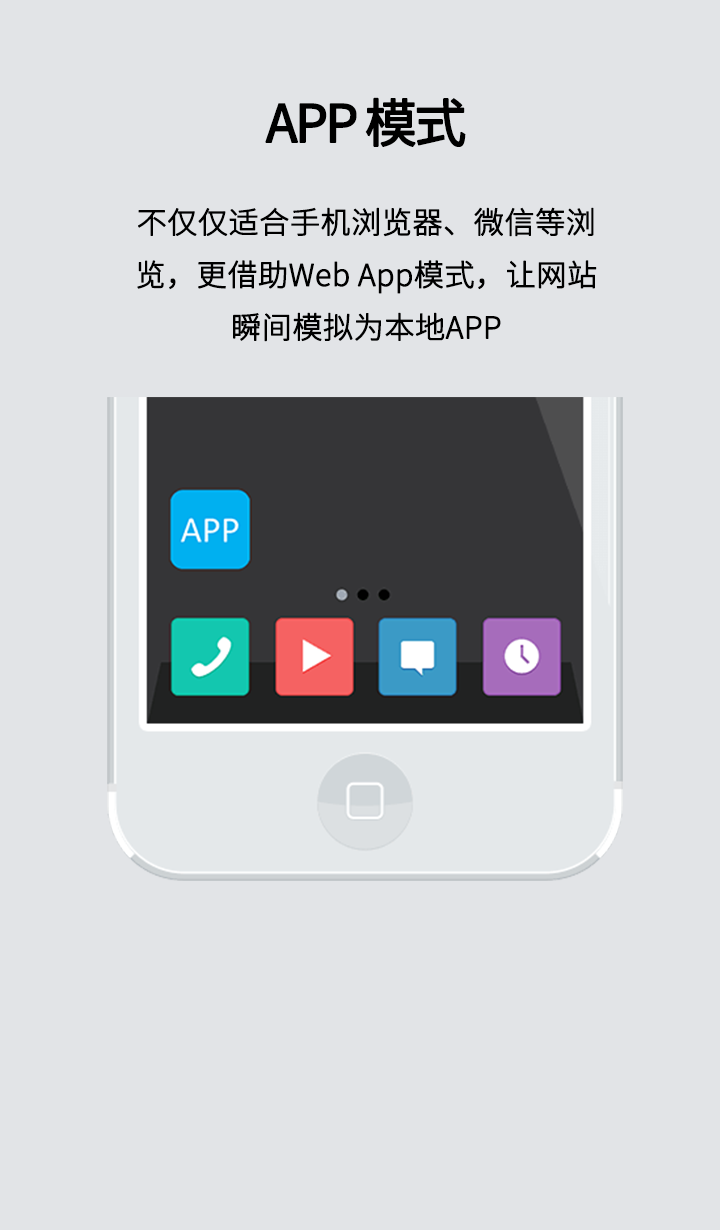
<style>
.page{position:relative;width:720px;height:1230px;background:#e2e4e7}
.page>*{position:absolute;margin:0}
.t1{font:52px "SourceHanSansCN-Regular";letter-spacing:-0.075em;color:#000000;font-weight:bold}
.t2{font:30px "SourceHanSansCN-Light";letter-spacing:-0.005em;color:#000000;font-weight:bold}
</style>
<div class="page">
<p class="t1" style="left:265px;top:97px;width:201px;height:50px">APP 模式</p>
<p class="t2" style="left:137px;top:207px;width:460px;height:135px;text-align:center">不仅仅适合手机浏览器、微信等浏览，更借助Web App模式，让网站瞬间模拟为本地APP</p>
</div>
